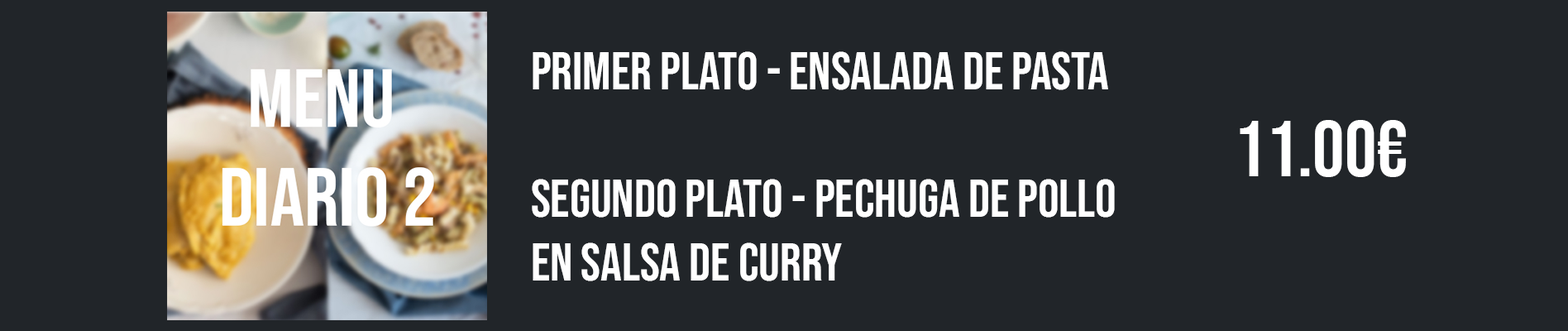
<style>
.page{position:relative;width:1568px;height:331px;background:#212529}
.page>*{position:absolute;margin:0}
.t1{font:52.9px "BebasNeue-Regular";color:#ffffff}
.t2{font:79.4px "BebasNeue-Regular";color:#ffffff}
</style>
<div class="page">
<p class="t1" style="left:532px;top:51px;width:583px;height:230px">Primer plato - Ensalada de pasta<br><br>Segundo Plato - Pechuga de pollo <br>en salsa de curry</p>
<p class="t2" style="left:1240px;top:120px;width:166px;height:57px">11.00€</p>
</div>
